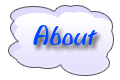
<style>
.page{position:relative;width:120px;height:80px;background:#ffffff}
.page>*{position:absolute;margin:0}
.t1{font:30px "BiffoMTStd";color:#0144ff}
</style>
<div class="page">
<p class="t1" style="left:33px;top:25px;width:64px;height:20px">About</p>
</div>
